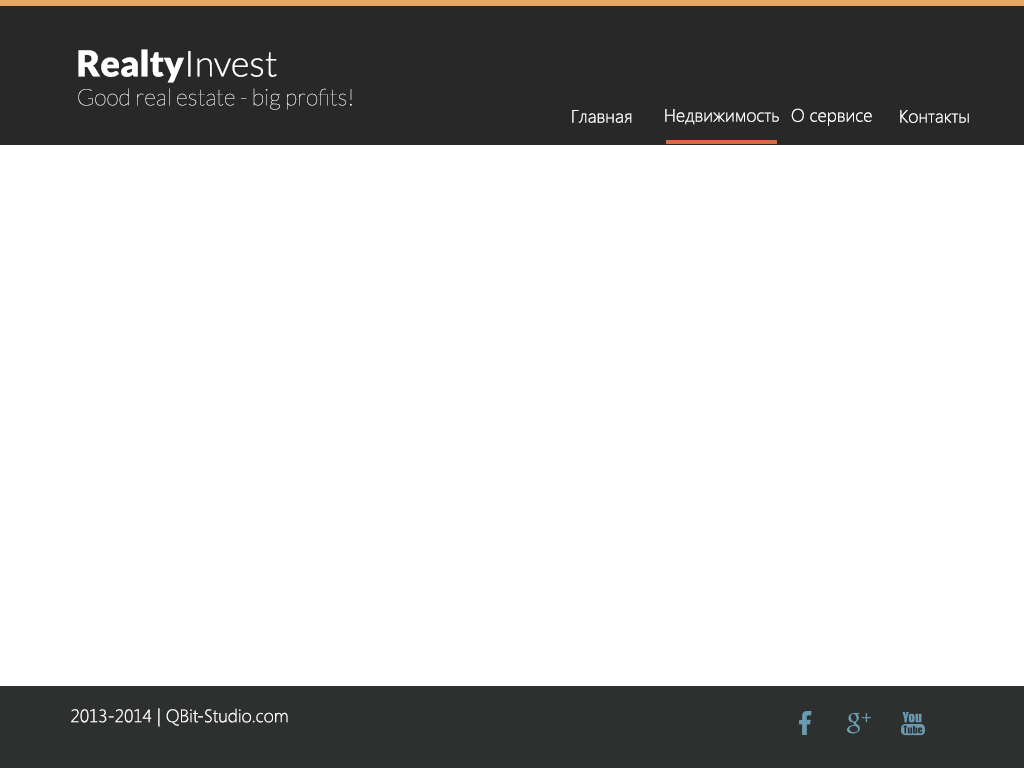
<style>
.page{position:relative;width:1024px;height:768px;background:#ffffff}
.page>*{position:absolute;margin:0}
.t1{font:36px "Lato-Black";color:#ffffff}
.t2{font:36px "Lato-Light";color:#ffffff}
.t3{font:23px "Lato-Hairline";color:#ffffff}
.t4{font:18px "SegoeUI-Light";color:#ffffff}
</style>
<div class="page">
<p class="t1" style="left:78px;top:49px;width:199px;height:34px">Realty<span class="t2">Invest</span></p>
<p class="t3" style="left:78px;top:88px;width:274px;height:22px">Good real estate - big profits!</p>
<p class="t4" style="left:572px;top:110px;width:60px;height:13px">Главная</p>
<p class="t4" style="left:665px;top:109px;width:114px;height:16px">Недвижимость</p>
<p class="t4" style="left:791px;top:108px;width:81px;height:18px">О сервисе</p>
<p class="t4" style="left:900px;top:110px;width:69px;height:13px">Контакты</p>
<p class="t4" style="left:71px;top:708px;width:217px;height:19px">2013-2014 | QBit-Studio.com</p>
</div>
